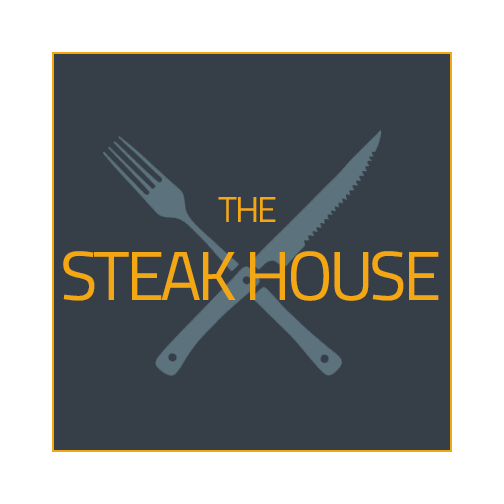
<style>
.page{position:relative;width:504px;height:504px;background:#363f48}
.page>*{position:absolute;margin:0}
.t1{font:36px "TitilliumWeb-Regular";letter-spacing:-0.06em;color:#f3a712;text-transform:uppercase}
.t2{font:69.6px "TitilliumWeb-Regular";letter-spacing:-0.06em;color:#f3a712;text-transform:uppercase}
</style>
<div class="page">
<p class="t1" style="left:218px;top:197px;width:58px;height:25px">THE</p>
<p class="t2" style="left:63px;top:251px;width:376px;height:50px">STEAK HOUSE</p>
</div>
